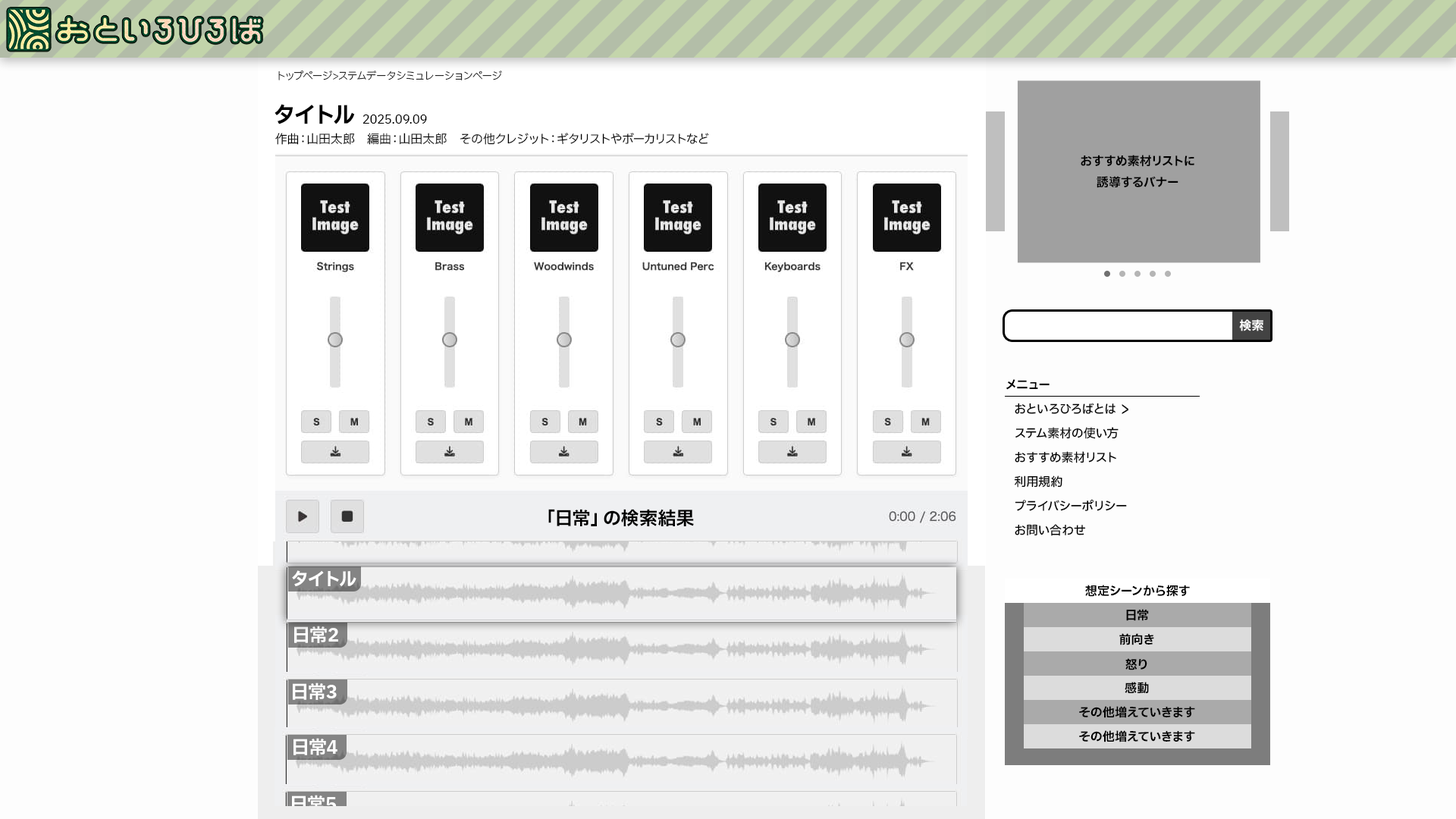
<style>
.page{position:relative;width:1456px;height:819px;background:#fdfdfd}
.page>*{position:absolute;margin:0}
.t1{font:10.6px "IBMPlexSansJP-Light"}
.t2{font:22.7px "IBMPlexSansJP-Bold";color:#000000}
.t3{font:12.1px "IBMPlexSansJP-Regular";color:#000000}
.t4{font:12.1px "IBMPlexSansJP-Bold";color:#000000}
.t5{font:12.1px "IBMPlexSansJP-Bold";color:#ffffff}
.t6{font:12.1px "IBMPlexSansJP-Medium";color:#000000}
.t7{font:15.6px "IBMPlexSansJP-Medium";color:#000000;scale:0.93 1}
.t8{font:18.2px "IBMPlexSansJP-Bold";color:#000000}
</style>
<div class="page">
<p class="t1" style="left:278px;top:71px;width:224px;height:9px">トップページ&gt;ステムデータシミュレーションページ</p>
<p class="t2" style="left:275px;top:104px;width:80px;height:20px">タイトル</p>
<p class="t3" style="left:362px;top:115px;width:65px;height:9px">2025.09.09</p>
<p class="t3" style="left:275px;top:133px;width:434px;height:12px">作曲：山田太郎　編曲：山田太郎　その他クレジット：ギタリストやボーカリストなど</p>
<p class="t4" style="left:1081px;top:155px;width:113px;height:33px;text-align:center">おすすめ素材リストに<br>誘導するバナー</p>
<p class="t5" style="left:1239px;top:319px;width:24px;height:12px">検索</p>
<p class="t4" style="left:1006px;top:379px;width:44px;height:11px">メニュー</p>
<p class="t6" style="left:1015px;top:403px;width:100px;height:11px">おといろひろばとは</p>
<p class="t7" style="left:1122px;top:404px;width:6px;height:10px">&gt;</p>
<p class="t6" style="left:1015px;top:427px;width:104px;height:12px">ステム素材の使い方</p>
<p class="t6" style="left:1015px;top:451px;width:101px;height:12px">おすすめ素材リスト</p>
<p class="t6" style="left:1014px;top:475px;width:48px;height:13px">利用規約</p>
<p class="t8" style="left:548px;top:509px;width:146px;height:17px">「日常」の検索結果</p>
<p class="t6" style="left:1015px;top:499px;width:112px;height:12px">プライバシーポリシー</p>
<p class="t6" style="left:1015px;top:524px;width:71px;height:12px">お問い合わせ</p>
<p class="t4" style="left:1085px;top:585px;width:105px;height:12px">想定シーンから探す</p>
<p class="t4" style="left:1126px;top:609px;width:23px;height:12px">日常</p>
<p class="t4" style="left:1119px;top:633px;width:35px;height:12px">前向き</p>
<p class="t4" style="left:1125px;top:658px;width:22px;height:12px">怒り</p>
<p class="t4" style="left:1125px;top:682px;width:24px;height:12px">感動</p>
<p class="t4" style="left:1079px;top:706px;width:116px;height:12px">その他増えていきます</p>
<p class="t4" style="left:1079px;top:730px;width:116px;height:12px">その他増えていきます</p>
</div>
